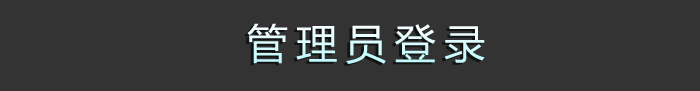
<style>
.page{position:relative;width:700px;height:91px;background:#333333}
.page>*{position:absolute;margin:0}
.t1{font:41px "MicrosoftYaHei";letter-spacing:0.2em}
</style>
<div class="page">
<p class="t1" style="left:247px;top:23px;width:238px;height:41px">管理员登录</p>
</div>
